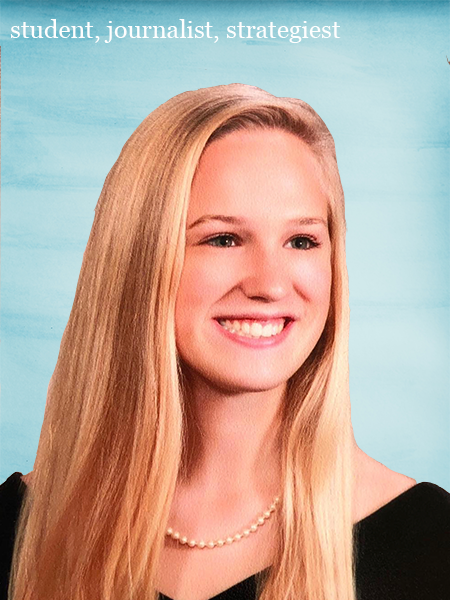
<style>
.page{position:relative;width:450px;height:600px}
.page>*{position:absolute;margin:0}
.t1{font:25px "Georgia";color:#fefefe}
</style>
<div class="page">
<p class="t1" style="left:10px;top:19px;width:331px;height:24px">student, journalist, strategiest</p>
</div>
